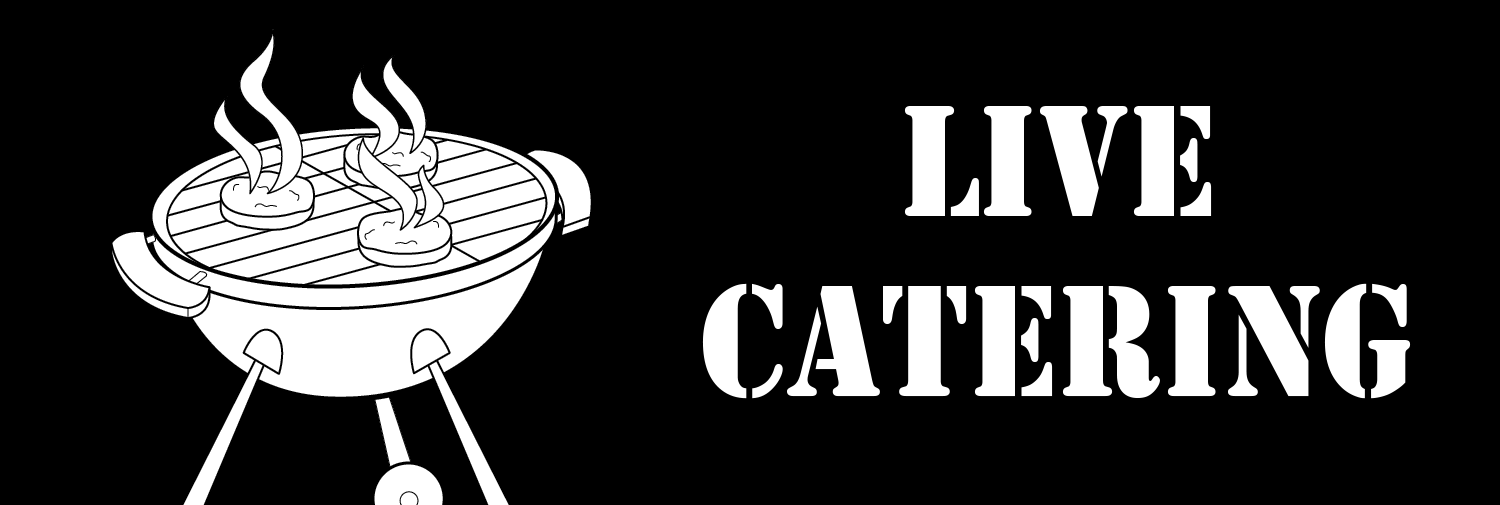
<style>
.page{position:relative;width:1500px;height:505px;background:#000000}
.page>*{position:absolute;margin:0}
.t1{font:165px "Stencil";color:#ffffff;scale:0.91 1}
</style>
<div class="page">
<p class="t1" style="left:702px;top:106px;width:709px;height:293px;text-align:center">Live<br>Catering</p>
</div>
